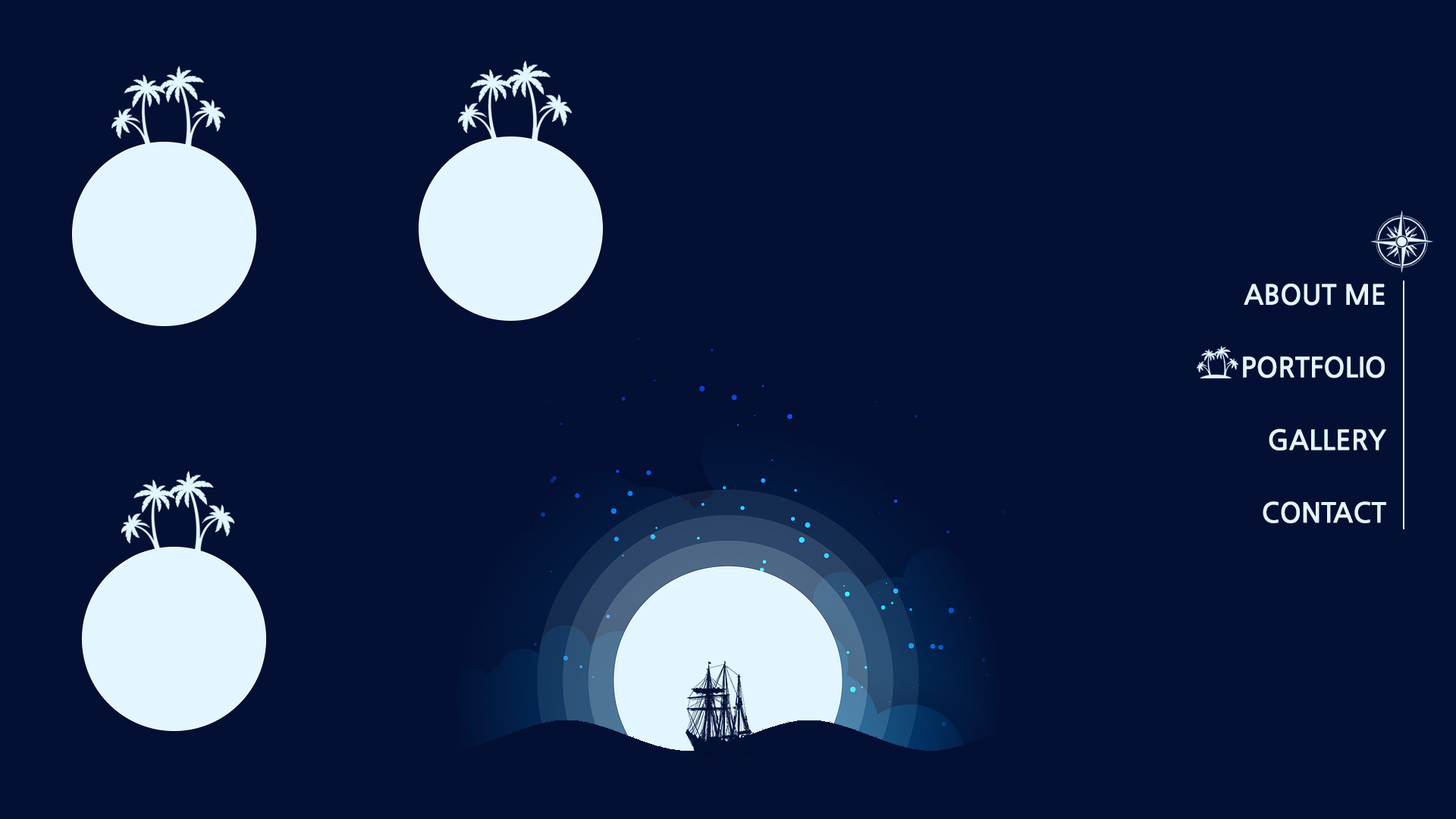
<style>
.page{position:relative;width:1456px;height:819px;background:#030f33}
.page>*{position:absolute;margin:0}
.t1{font:27.3px/36.3px "NanumGothicBold";color:#e3f5ff}
</style>
<div class="page">
<p class="t1" style="left:1243px;top:284px;width:143px;height:239px;text-align:right">ABOUT ME<br><br>PORTFOLIO<br><br>GALLERY<br><br>CONTACT</p>
</div>
